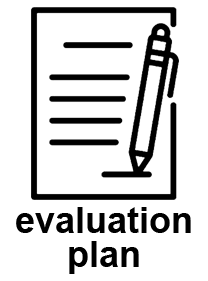
<style>
.page{position:relative;width:208px;height:281px;background:#ffffff}
.page>*{position:absolute;margin:0}
.t1{font:36px/34px "Arial-BoldMT";color:#000000}
</style>
<div class="page">
<p class="t1" style="left:16px;top:207px;width:175px;height:67px;text-align:center">evaluation<br>plan</p>
</div>
